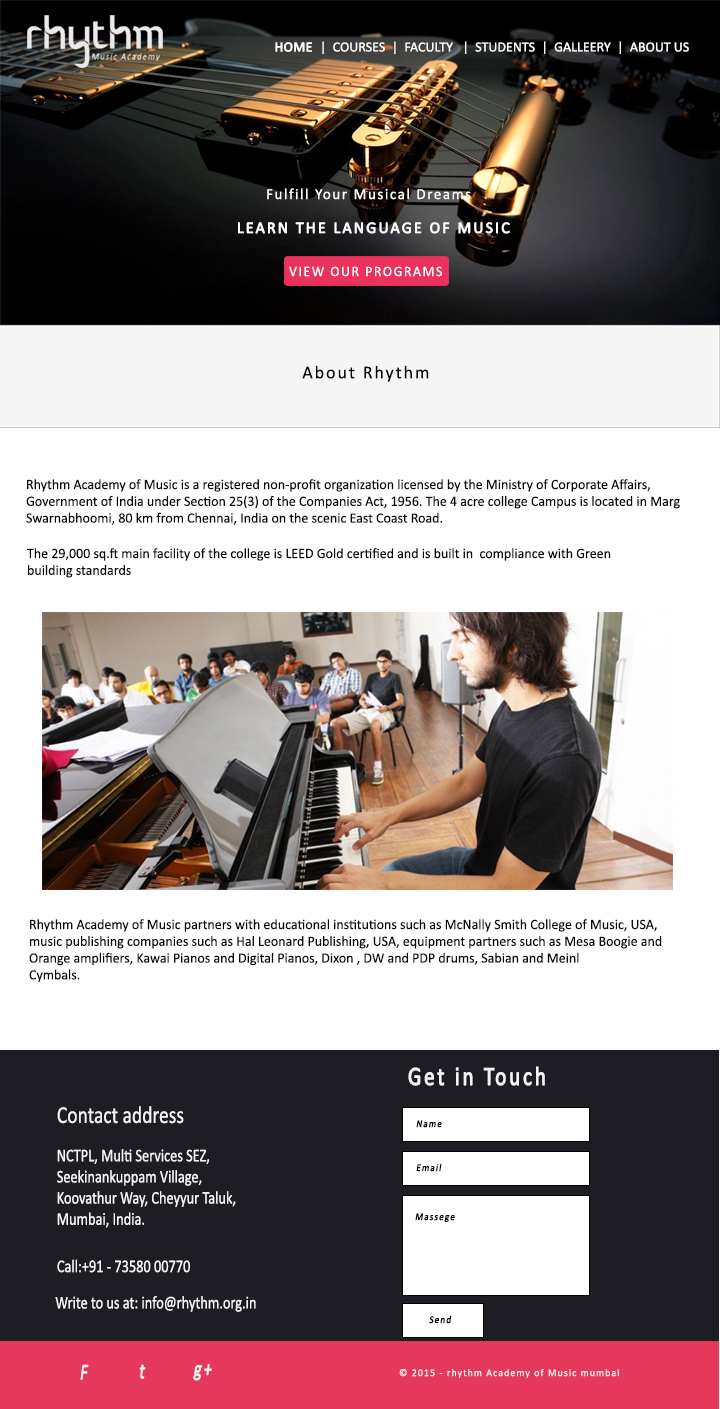
<style>
.page{position:relative;width:720px;height:1409px;background:#ffffff}
.page>*{position:absolute;margin:0}
.t1{font:14px "Calibri";color:#fdfdfd}
.t2{font:14px "Calibri";color:#fdfdfd;font-weight:bold}
.t3{font:15.3px "Calibri";letter-spacing:0.105em;color:#fdfdfd}
.t4{font:16.3px "Calibri";letter-spacing:0.105em;color:#fdfdfd;font-weight:bold}
.t5{font:14.3px "Calibri";letter-spacing:0.105em;color:#fefcfc}
.t6{font:18.4px "Calibri";letter-spacing:0.105em;color:#0a0a0a}
.t7{font:14.3px "Calibri";color:#0a0a0a}
.t8{font:26.5px "Calibri";letter-spacing:0.105em;color:#f6f3f4;font-weight:bold;scale:0.8 1}
.t9{font:24.5px "Calibri";color:#f6f3f4;scale:0.8 1}
.t10{font:10.2px "Calibri";letter-spacing:0.105em;color:#070707;font-weight:bold;font-style:italic;scale:0.88 1}
.t11{font:18px "Calibri";color:#f6f3f4;scale:0.8 1}
.t12{font:22.5px "Calibri";letter-spacing:0.105em;color:#f6f3f4;font-weight:bold;font-style:italic;scale:0.72 1}
.t13{font:10.2px "Calibri";letter-spacing:0.105em;color:#f6f3f4}
</style>
<div class="page">
<p class="t1" style="left:275px;top:41px;width:414px;height:13px"><span class="t2">HOME  </span>|  COURSES  |  FACULTY   |  STUDENTS  |  GALLEERY  |  ABOUT US</p>
<p class="t3" style="left:267px;top:188px;width:204px;height:12px">Fulfill Your Musical Dreams</p>
<p class="t4" style="left:238px;top:222px;width:272px;height:12px">LEARN THE LANGUAGE OF MUSIC</p>
<p class="t5" style="left:289px;top:266px;width:153px;height:11px">VIEW OUR PROGRAMS</p>
<p class="t6" style="left:302px;top:365px;width:127px;height:17px">About Rhythm</p>
<p class="t7" style="left:26px;top:479px;width:654px;height:46px">Rhythm Academy of Music is a registered non-profit organization licensed by the Ministry of Corporate Affairs,<br>Government of India under Section 25(3) of the Companies Act, 1956. The 4 acre college Campus is located in Marg <br>Swarnabhoomi, 80 km from Chennai, India on the scenic East Coast Road.</p>
<p class="t7" style="left:27px;top:548px;width:584px;height:30px">The 29,000 sq.ft main facility of the college is LEED Gold certified and is built in  compliance with Green <br>building standards</p>
<p class="t7" style="left:29px;top:919px;width:633px;height:63px">Rhythm Academy of Music partners with educational institutions such as McNally Smith College of Music, USA, <br>music publishing companies such as Hal Leonard Publishing, USA, equipment partners such as Mesa Boogie and <br>Orange amplifiers, Kawai Pianos and Digital Pianos, Dixon , DW and PDP drums, Sabian and Meinl <br>Cymbals.</p>
<p class="t8" style="left:408px;top:1066px;width:137px;height:20px">Get in Touch</p>
<p class="t9" style="left:57px;top:1106px;width:127px;height:18px">Contact address</p>
<p class="t10" style="left:416px;top:1120px;width:26px;height:8px">Name</p>
<p class="t11" style="left:57px;top:1149px;width:179px;height:79px">NCTPL, Multi Services SEZ, <br>Seekinankuppam Village, <br>Koovathur Way, Cheyyur Taluk, <br>Mumbai, India.</p>
<p class="t10" style="left:416px;top:1163px;width:26px;height:9px">Email</p>
<p class="t10" style="left:415px;top:1213px;width:40px;height:9px">Massege</p>
<p class="t11" style="left:57px;top:1259px;width:133px;height:14px">Call:+91 - 73580 00770</p>
<p class="t11" style="left:55px;top:1296px;width:201px;height:16px">Write to us at: info@rhythm.org.in</p>
<p class="t10" style="left:429px;top:1315px;width:23px;height:9px">Send</p>
<p class="t12" style="left:80px;top:1364px;width:9px;height:16px">F</p>
<p class="t12" style="left:139px;top:1364px;width:7px;height:15px">t</p>
<p class="t12" style="left:193px;top:1364px;width:19px;height:17px">g+</p>
<p class="t13" style="left:399px;top:1369px;width:220px;height:9px">© 2015 - rhythm Academy of Music mumbai</p>
</div>
